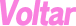
<style>
.page{position:relative;width:76px;height:26px;background:#f980de}
.page>*{position:absolute;margin:0}
.t1{font:32px "RodinPro-EB";letter-spacing:-0.054em;color:#f980de;font-style:italic;scale:0.84 1}
</style>
<div class="page">
<p class="t1" style="left:0px;top:0px;width:76px;height:26px">Voltar</p>
</div>
